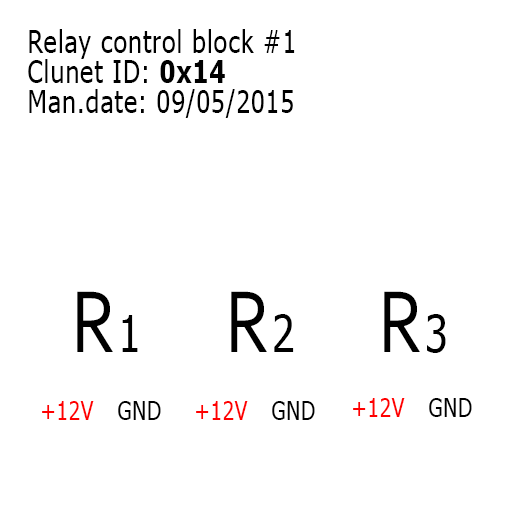
<style>
.page{position:relative;width:520px;height:520px;background:#ffffff}
.page>*{position:absolute;margin:0}
.t1{font:30.8px "Tahoma";letter-spacing:0.04em;color:#000000;scale:0.81 1}
.t2{font:30.8px "Tahoma-Bold";letter-spacing:0.04em;color:#000000;scale:0.81 1}
.t3{font:92.2px "Corbel";letter-spacing:0.04em;color:#000000;scale:0.81 1}
.t4{font:51.3px "Tahoma";letter-spacing:0.04em;color:#000000;scale:0.81 1}
.t5{font:25.6px "Tahoma";letter-spacing:0.04em;color:#ff0000;scale:0.81 1}
.t6{font:25.6px "Tahoma";letter-spacing:0.04em;color:#000000;scale:0.81 1}
</style>
<div class="page">
<p class="t1" style="left:28px;top:29px;width:267px;height:89px">Relay control block #1<br>Clunet ID: <span class="t2">0x14<br></span>Man.date: 09/05/2015</p>
<p class="t3" style="left:77px;top:291px;width:61px;height:61px">R<span class="t4">1</span></p>
<p class="t3" style="left:231px;top:291px;width:63px;height:61px">R<span class="t4">2</span></p>
<p class="t3" style="left:384px;top:291px;width:62px;height:62px">R<span class="t4">3</span></p>
<p class="t5" style="left:42px;top:401px;width:52px;height:19px">+12V</p>
<p class="t6" style="left:118px;top:401px;width:43px;height:19px">GND</p>
<p class="t5" style="left:196px;top:401px;width:52px;height:19px">+12V</p>
<p class="t6" style="left:272px;top:401px;width:43px;height:19px">GND</p>
<p class="t5" style="left:353px;top:398px;width:52px;height:19px">+12V</p>
<p class="t6" style="left:429px;top:398px;width:43px;height:19px">GND</p>
</div>
